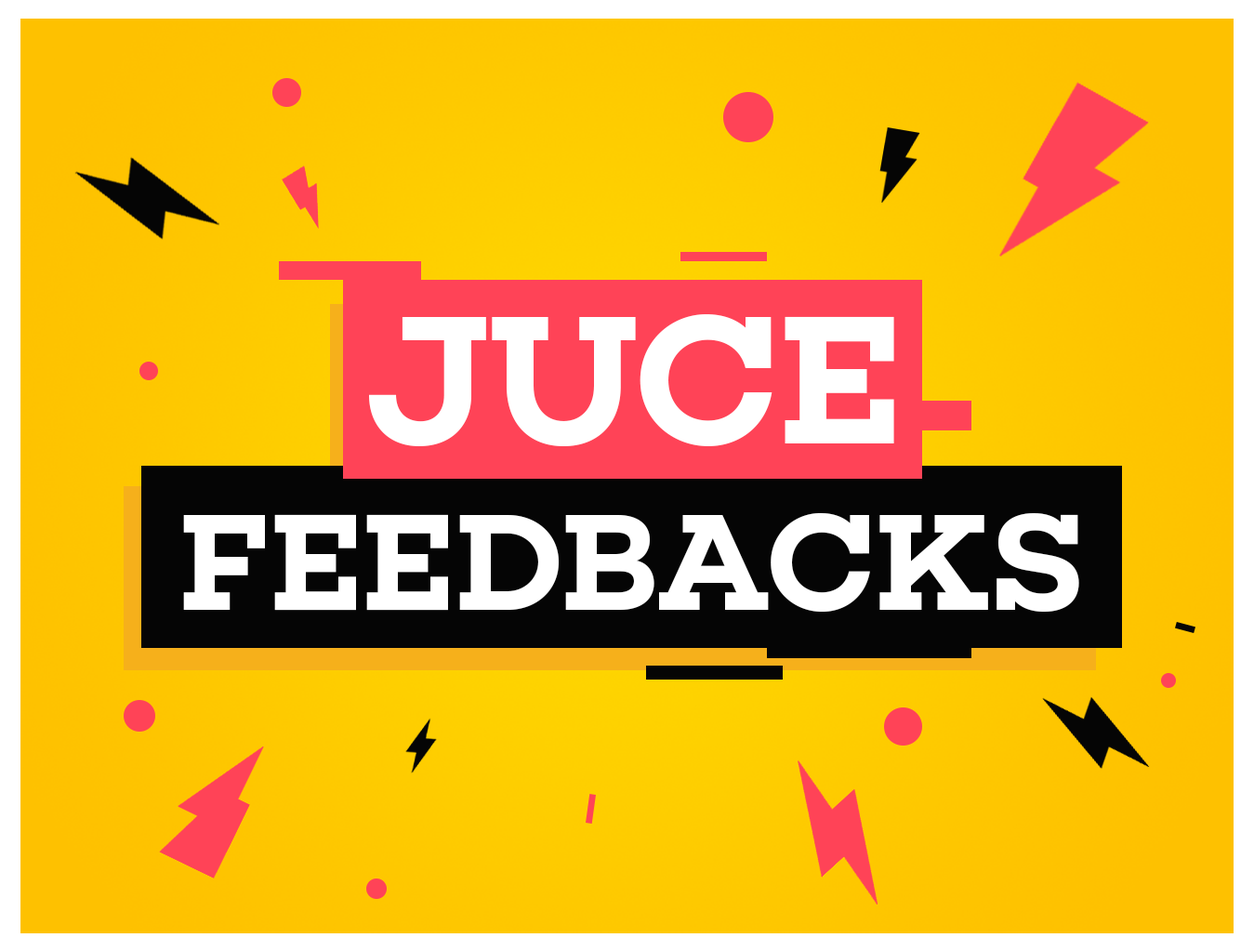
<style>
.page{position:relative;width:1254px;height:951px}
.page>*{position:absolute;margin:0}
.t1{font:185.9px "Choplin-SemiBold";color:#ffffff}
.t2{font:139.4px "Choplin-SemiBold";color:#ffffff}
.t3{font:185.9px "Choplin-SemiBold";color:#ff4357}
</style>
<div class="page">
<p class="t1" style="left:369px;top:314px;width:525px;height:132px">JUCE</p>
<p class="t2" style="left:183px;top:512px;width:896px;height:100px">FEEDBACKS<span class="t3">S</span></p>
</div>
